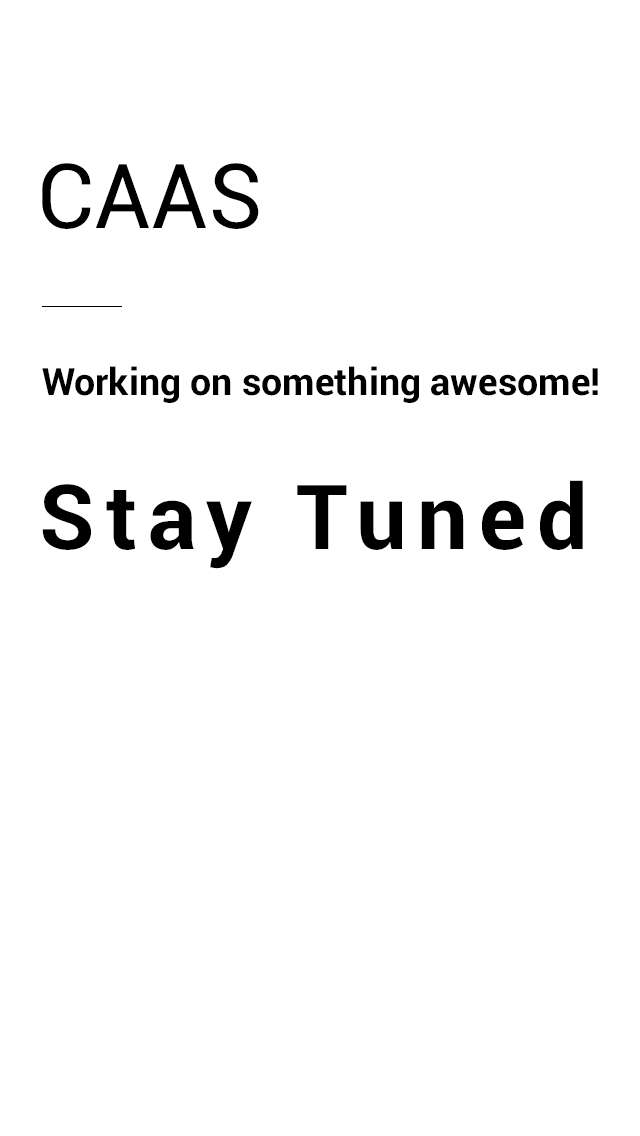
<style>
.page{position:relative;width:640px;height:1136px;background:#ffffff}
.page>*{position:absolute;margin:0}
.t1{font:89.9px "Roboto-Regular";color:#000000}
.t2{font:37.4px "Roboto-Bold";color:#000000}
.t3{font:89.9px "Roboto-Bold";letter-spacing:0.12em;color:#000000}
</style>
<div class="page">
<p class="t1" style="left:42px;top:163px;width:217px;height:66px">CAAS</p>
<p class="t2" style="left:42px;top:366px;width:556px;height:37px">Working on something awesome!</p>
<p class="t3" style="left:42px;top:480px;width:541px;height:89px">Stay Tuned</p>
</div>
